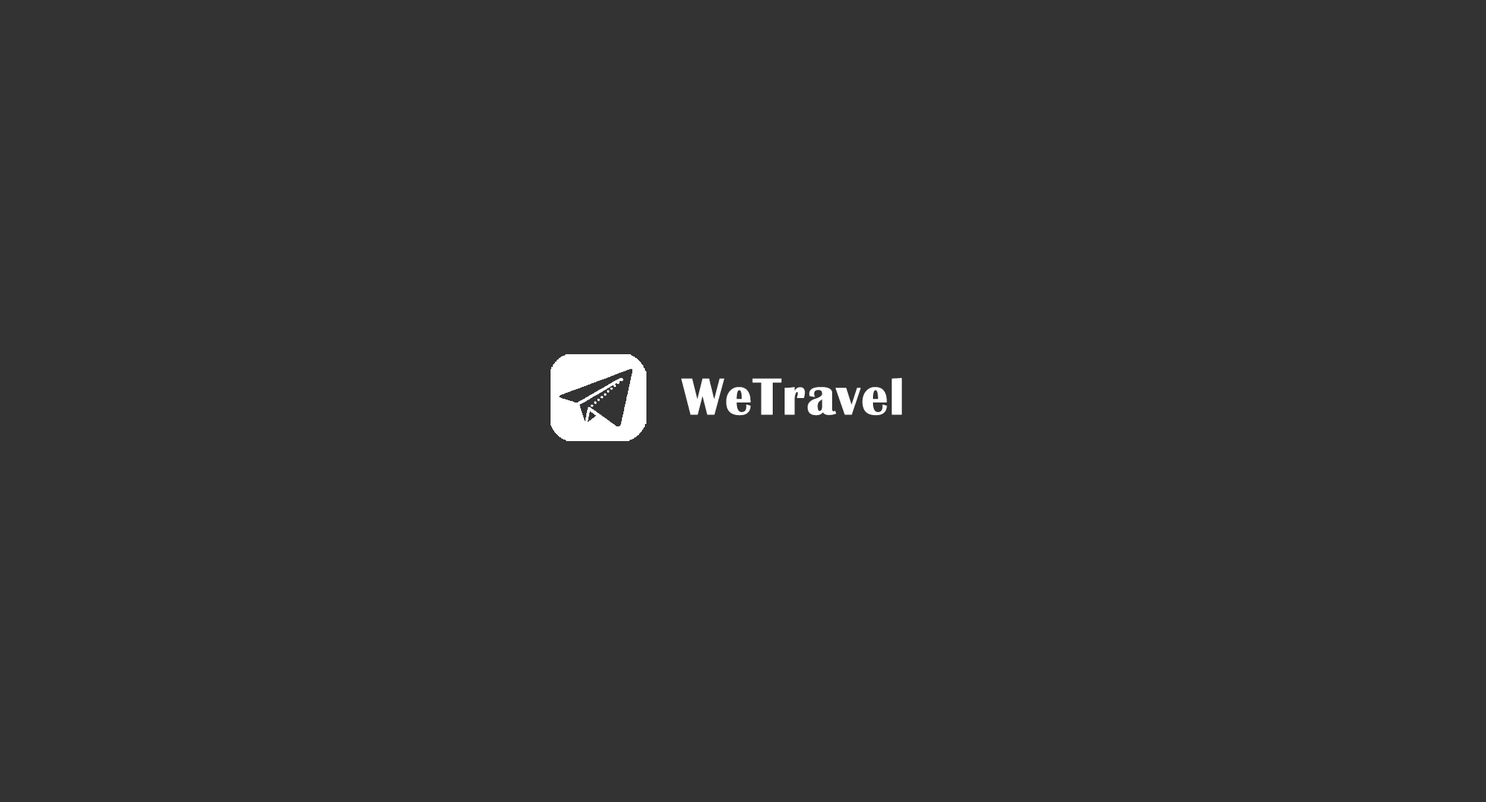
<style>
.page{position:relative;width:1486px;height:802px;background:#333333}
.page>*{position:absolute;margin:0}
.t1{font:53.5px "BritannicBold";color:#ffffff;font-weight:bold}
</style>
<div class="page">
<p class="t1" style="left:681px;top:378px;width:221px;height:38px">WeTravel</p>
</div>
